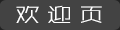
<style>
.page{position:relative;width:120px;height:30px;background:#434343}
.page>*{position:absolute;margin:0}
.t1{font:20.8px "ZHSRXT--GBK1-0";color:#ffffff;scale:1.2 1}
</style>
<div class="page">
<p class="t1" style="left:16px;top:5px;width:86px;height:18px">欢 迎 页</p>
</div>
